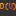
<style>
.page{position:relative;width:16px;height:16px;background:#333333}
.page>*{position:absolute;margin:0}
.t1{font:7px "LucidaSans-Typewriter"}
.t2{font:7px "LucidaSans-Typewriter";color:#ce2c2c}
</style>
<div class="page">
<p class="t1" style="left:0px;top:3px;width:16px;height:7px">D( )</p>
<p class="t2" style="left:9px;top:3px;width:4px;height:6px">U</p>
</div>
